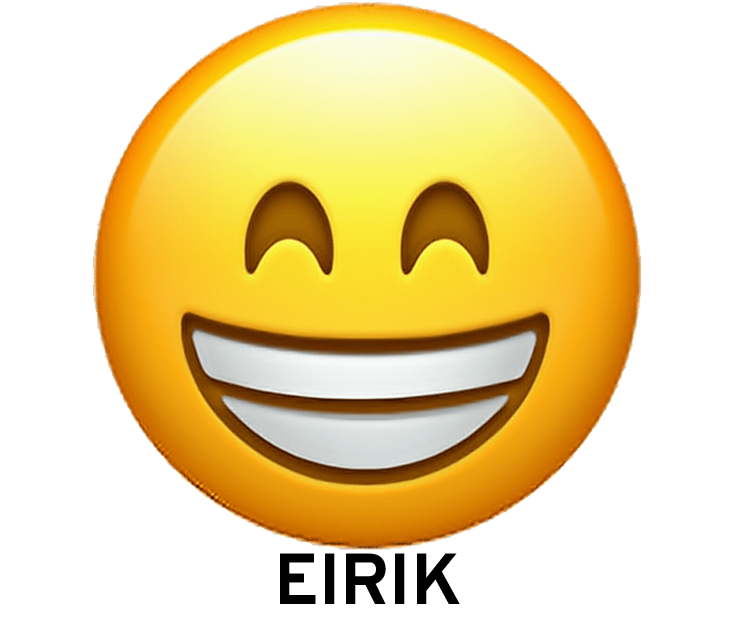
<style>
.page{position:relative;width:735px;height:617px;background:#ffffff}
.page>*{position:absolute;margin:0}
.t1{font:72px "OverpassRoman-Bold";color:#000000}
</style>
<div class="page">
<p class="t1" style="left:280px;top:553px;width:180px;height:51px">EIRIK</p>
</div>
